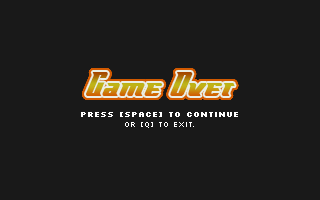
<style>
.page{position:relative;width:320px;height:200px;background:#191919}
.page>*{position:absolute;margin:0}
.t1{font:36px "FlyboyBB"}
.t2{font:8px "Silkscreen-Bold";color:#ffffff}
.t3{font:8px "Silkscreen";color:#ffffff}
</style>
<div class="page">
<p class="t1" style="left:86px;top:72px;width:149px;height:24px">Game Over</p>
<p class="t2" style="left:81px;top:112px;width:157px;height:16px;text-align:center">Press [SPACE] to Continue<br><span class="t3">or [q] To Exit.</span></p>
</div>
